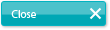
<style>
.page{position:relative;width:110px;height:30px;background:#4dc2cb}
.page>*{position:absolute;margin:0}
.t1{font:11px "MyriadPro-Regular";color:#ffffff}
</style>
<div class="page">
<p class="t1" style="left:11px;top:10px;width:25px;height:8px">Close</p>
</div>
